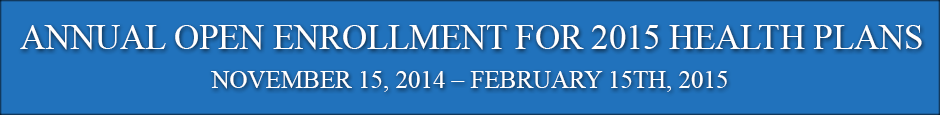
<style>
.page{position:relative;width:940px;height:115px;background:#2172bc}
.page>*{position:absolute;margin:0}
.t1{font:35px "TimesNewRomanPSMT";color:#ffffff;text-transform:uppercase}
.t2{font:25px "TimesNewRomanPSMT";color:#ffffff;text-transform:uppercase}
</style>
<div class="page">
<p class="t1" style="left:20px;top:25px;width:902px;height:25px">Annual Open Enrollment for 2015 health plans</p>
<p class="t2" style="left:211px;top:71px;width:516px;height:21px">November 15, 2014 – February 15th, 2015</p>
</div>
